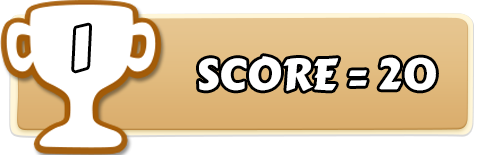
<style>
.page{position:relative;width:477px;height:155px;background:#ffffff}
.page>*{position:absolute;margin:0}
.t1{font:62.2px "CarterOne";color:#ffffff}
.t2{font:43.3px "CarterOne";color:#ffffff}
</style>
<div class="page">
<p class="t1" style="left:74px;top:25px;width:15px;height:46px">1</p>
<p class="t2" style="left:199px;top:56px;width:237px;height:35px">SCORE = 20</p>
</div>
